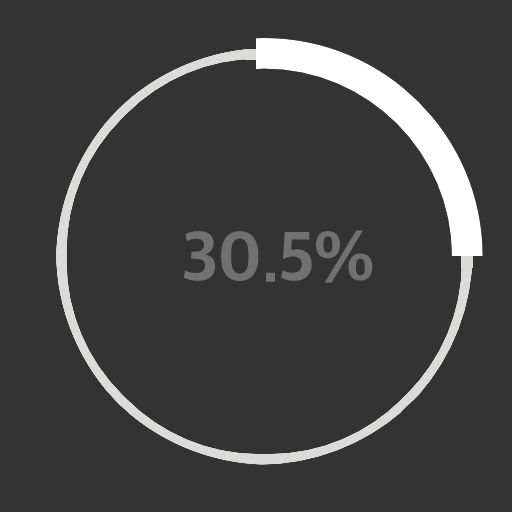
<style>
.page{position:relative;width:512px;height:512px;background:#333333}
.page>*{position:absolute;margin:0}
.t1{font:70.3px "AppleSDGothicNeo-ExtraBold";color:#717171;scale:0.96 1}
</style>
<div class="page">
<p class="t1" style="left:183px;top:230px;width:190px;height:53px">30.5%</p>
</div>
